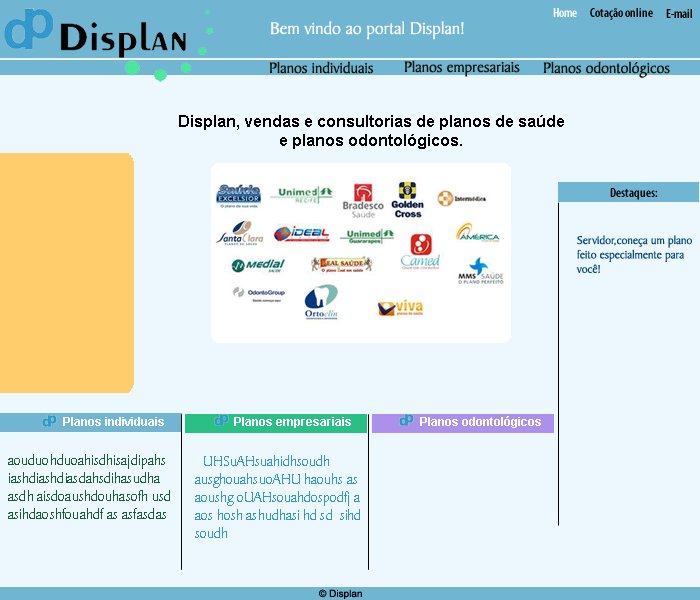
<style>
.page{position:relative;width:700px;height:600px;background:#ecf8fd}
.page>*{position:absolute;margin:0}
.t1{font:13px "MyriadPro-SemiboldCond";color:#fffefe}
.t2{font:13px "MyriadPro-SemiboldCond";color:#000000}
.t3{font:18px "BakerSignetAT-Roman";color:#fefffe}
.t4{font:16px "BakerSignetAT-Roman";color:#0f1204}
.t5{font:16px "Arial-BoldMT";color:#000000}
.t6{font:12px "BakerSignetAT-Roman";color:#074981}
.t7{font:12px "Arial-BoldMT";color:#fffefe}
.t8{font:12px "Arial-BoldMT";color:#fefefe}
.t9{font:12px "Arial-BoldMT";color:#ffffff}
.t10{font:15px "BakerSignetAT-Roman";color:#1a5d32}
.t11{font:15px "BakerSignetAT-Roman";color:#3397cd}
.t12{font:15px "BakerSignetAT-Roman";color:#eefef8}
.t13{font:10px "ArialMT";color:#000000}
</style>
<div class="page">
<p class="t1" style="left:553px;top:8px;width:24px;height:9px">Home</p>
<p class="t2" style="left:590px;top:8px;width:63px;height:12px">Cotação online</p>
<p class="t2" style="left:666px;top:9px;width:26px;height:9px">E-mail</p>
<p class="t3" style="left:271px;top:21px;width:193px;height:19px">Bem vindo ao portal Displan!</p>
<p class="t4" style="left:269px;top:61px;width:105px;height:13px">Planos individuais</p>
<p class="t4" style="left:404px;top:60px;width:116px;height:17px">Planos empresariais</p>
<p class="t4" style="left:543px;top:61px;width:127px;height:17px">Planos odontológicos</p>
<p class="t5" style="left:179px;top:115px;width:385px;height:34px;text-align:center">Displan, vendas e consultorias de planos de saúde<br>e planos odontológicos.</p>
<p class="t2" style="left:610px;top:188px;width:48px;height:12px">Destaques:</p>
<p class="t6" style="left:576px;top:235px;width:116px;height:38px">Servidor,coneça um plano<br>feito especialmente para<br>você!</p>
<p class="t7" style="left:63px;top:417px;width:101px;height:9px">Planos individuais</p>
<p class="t8" style="left:234px;top:417px;width:117px;height:11px">Planos empresariais</p>
<p class="t9" style="left:420px;top:416px;width:121px;height:12px">Planos odontológicos</p>
<p class="t10" style="left:8px;top:454px;width:162px;height:65px">aouduohduoahisdhisajdipahs<br>iashdiashdiasdahsdihasudha<br>asdh aisdoaushdouhasofh usd<br>asihdaoshfouahdf as asfasdas</p>
<p class="t11" style="left:195px;top:455px;width:165px;height:83px"><span class="t12">A</span>UHSuAHsuahidhsoudh<br>ausghouahsuoAHU haouhs as<br>aoushg oUAHsouahdospodfj a<br>aos hosh ashudhasi hd sd  sihd <br>soudh</p>
<p class="t13" style="left:319px;top:589px;width:43px;height:10px">© Displan</p>
</div>
